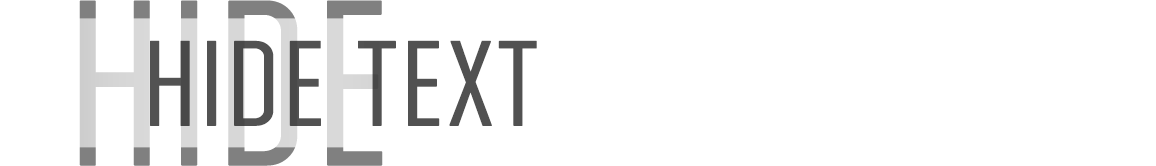
<style>
.page{position:relative;width:1156px;height:166px;background:#ffffff}
.page>*{position:absolute;margin:0}
.t1{font:214px "AgencyFB-Reg";text-transform:uppercase;font-weight:bold}
.t2{font:110px "AgencyFB-Reg";color:#515151;text-transform:uppercase;font-weight:bold;scale:1.1 1}
</style>
<div class="page">
<p class="t1" style="left:79px;top:0px;width:304px;height:166px">hide</p>
<p class="t2" style="left:150px;top:40px;width:387px;height:86px">hide text</p>
</div>
